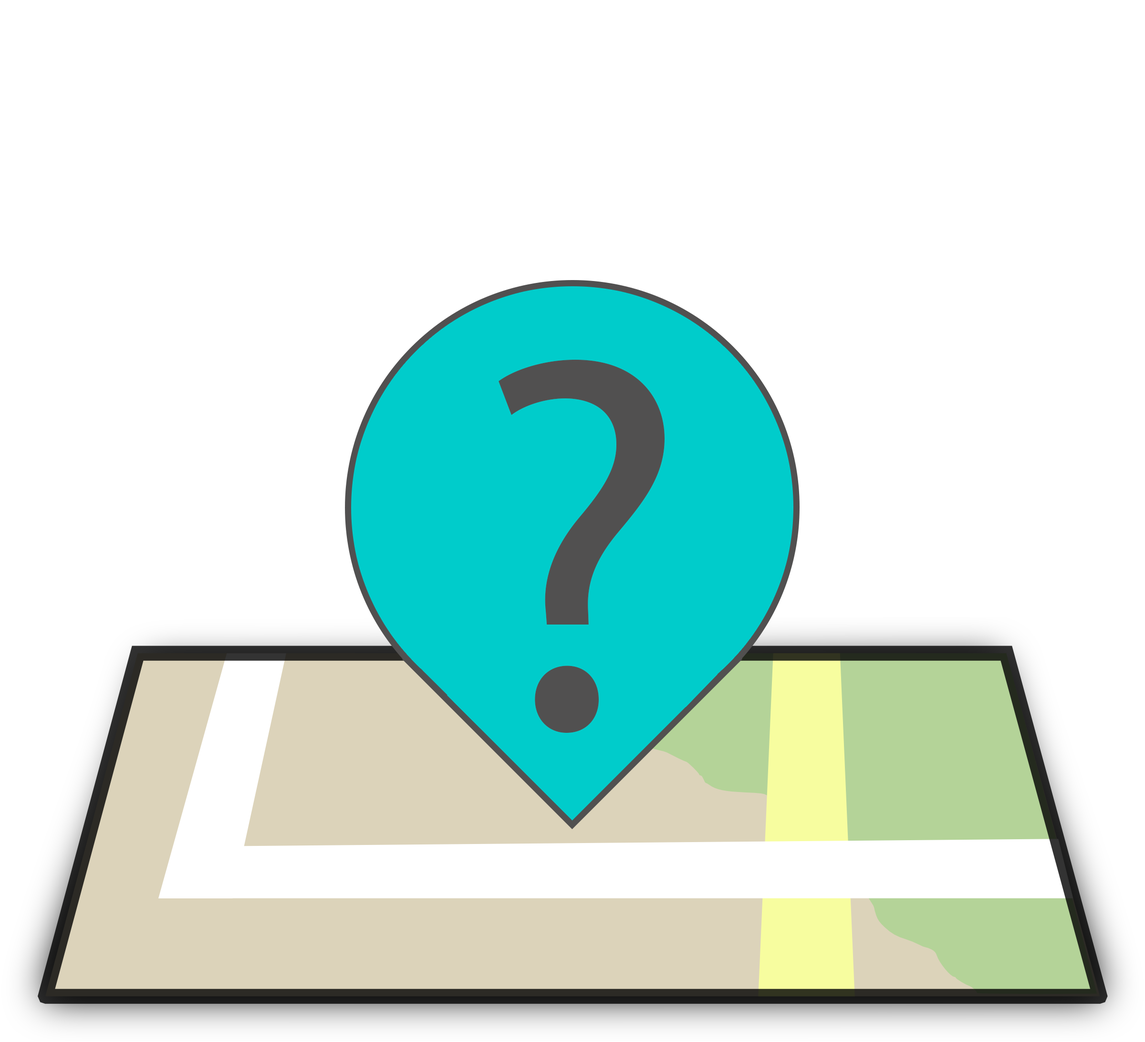
<style>
.page{position:relative;width:1145px;height:1042px;background:#ffffff}
.page>*{position:absolute;margin:0}
.t1{font:536.3px "MyriadPro-Regular";color:#515050}
</style>
<div class="page">
<p class="t1" style="left:498px;top:359px;width:166px;height:374px">?</p>
</div>
